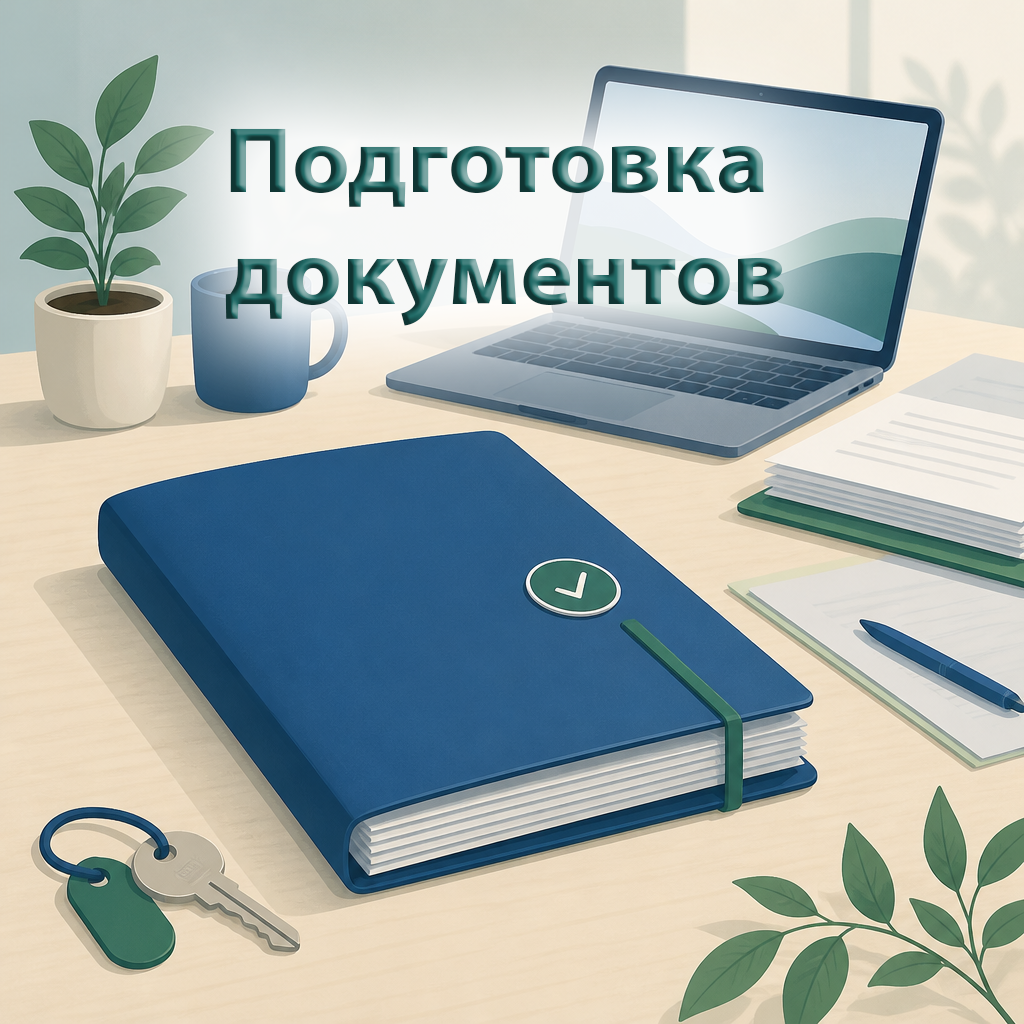
<style>
.page{position:relative;width:1024px;height:1024px}
.page>*{position:absolute;margin:0}
.t1{font:93.6px "MyriadPro-Bold";scale:1.07 1}
</style>
<div class="page">
<p class="t1" style="left:225px;top:128px;width:559px;height:198px;text-align:center">Подготовка <br>документов</p>
</div>
